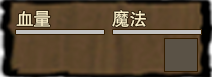
<style>
.page{position:relative;width:212px;height:77px}
.page>*{position:absolute;margin:0}
.t1{font:17.7px "FZHTJW--GB1-0";letter-spacing:-0.025em;color:#fdf2cc}
</style>
<div class="page">
<p class="t1" style="left:16px;top:10px;width:35px;height:17px">血量</p>
<p class="t1" style="left:112px;top:10px;width:34px;height:17px">魔法</p>
</div>
